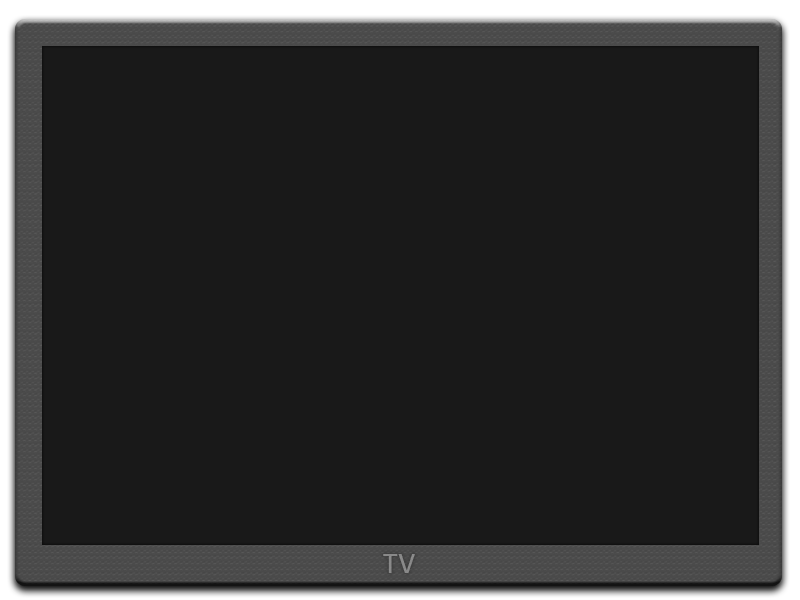
<style>
.page{position:relative;width:800px;height:600px;background:#191919}
.page>*{position:absolute;margin:0}
.t1{font:30px "Consolas";color:#898989}
</style>
<div class="page">
<p class="t1" style="left:383px;top:554px;width:32px;height:19px">TV</p>
</div>
